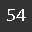
<style>
.page{position:relative;width:32px;height:32px;background:#333333}
.page>*{position:absolute;margin:0}
.t1{font:17.8px "MyriadPro-Regular";color:#ffffff;scale:1.12 1}
</style>
<div class="page">
<p class="t1" style="left:7px;top:9px;width:19px;height:12px">54</p>
</div>
